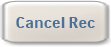
<style>
.page{position:relative;width:111px;height:47px}
.page>*{position:absolute;margin:0}
.t1{font:14px "Pronto";color:#4c7097}
</style>
<div class="page">
<p class="t1" style="left:16px;top:17px;width:79px;height:11px">Cancel Rec</p>
</div>
